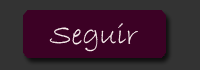
<style>
.page{position:relative;width:200px;height:70px;background:#3c0125}
.page>*{position:absolute;margin:0}
.t1{font:30px "BradleyHandITC";color:#f9efee}
</style>
<div class="page">
<p class="t1" style="left:49px;top:23px;width:89px;height:29px">Seguir</p>
</div>
